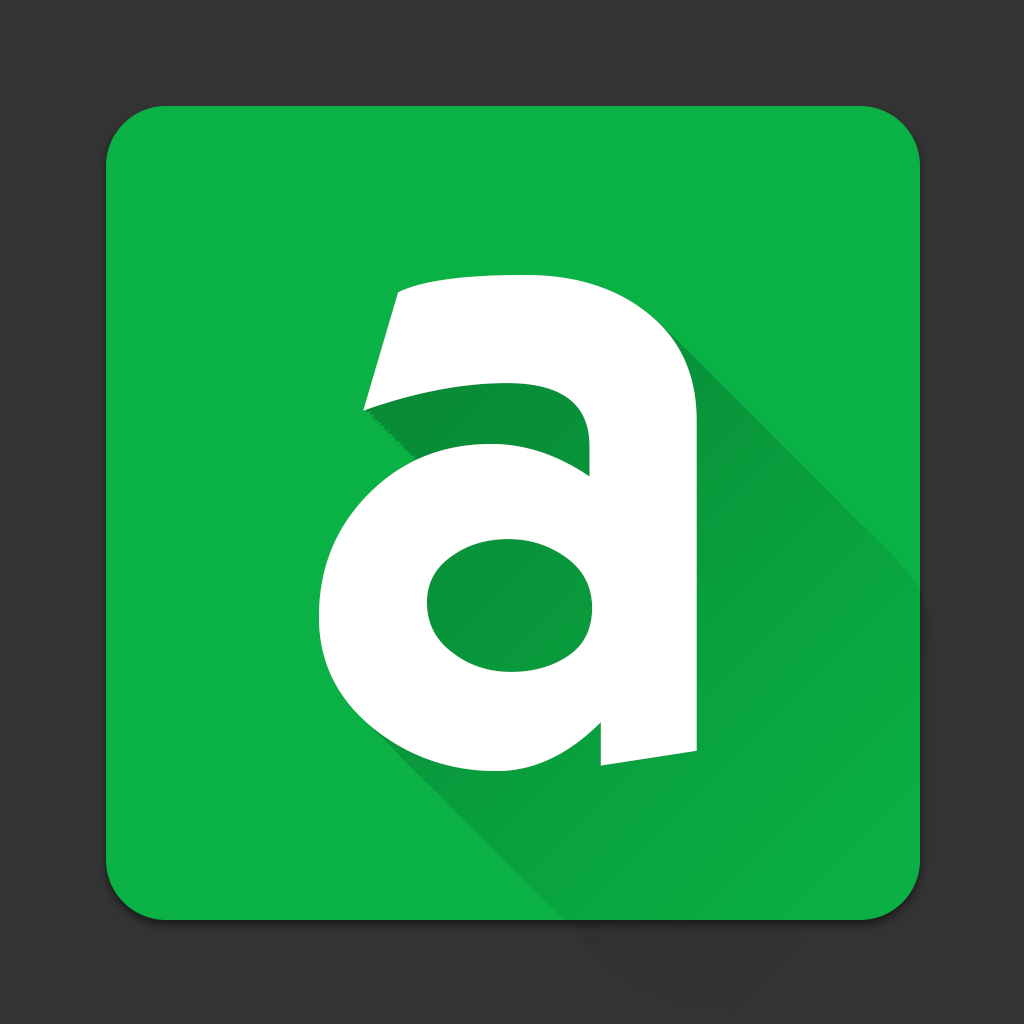
<style>
.page{position:relative;width:1024px;height:1024px;background:#0ab246}
.page>*{position:absolute;margin:0}
.t1{font:870px "ELEGANCE";color:#ffffff}
</style>
<div class="page">
<p class="t1" style="left:319px;top:275px;width:378px;height:496px">a</p>
</div>
